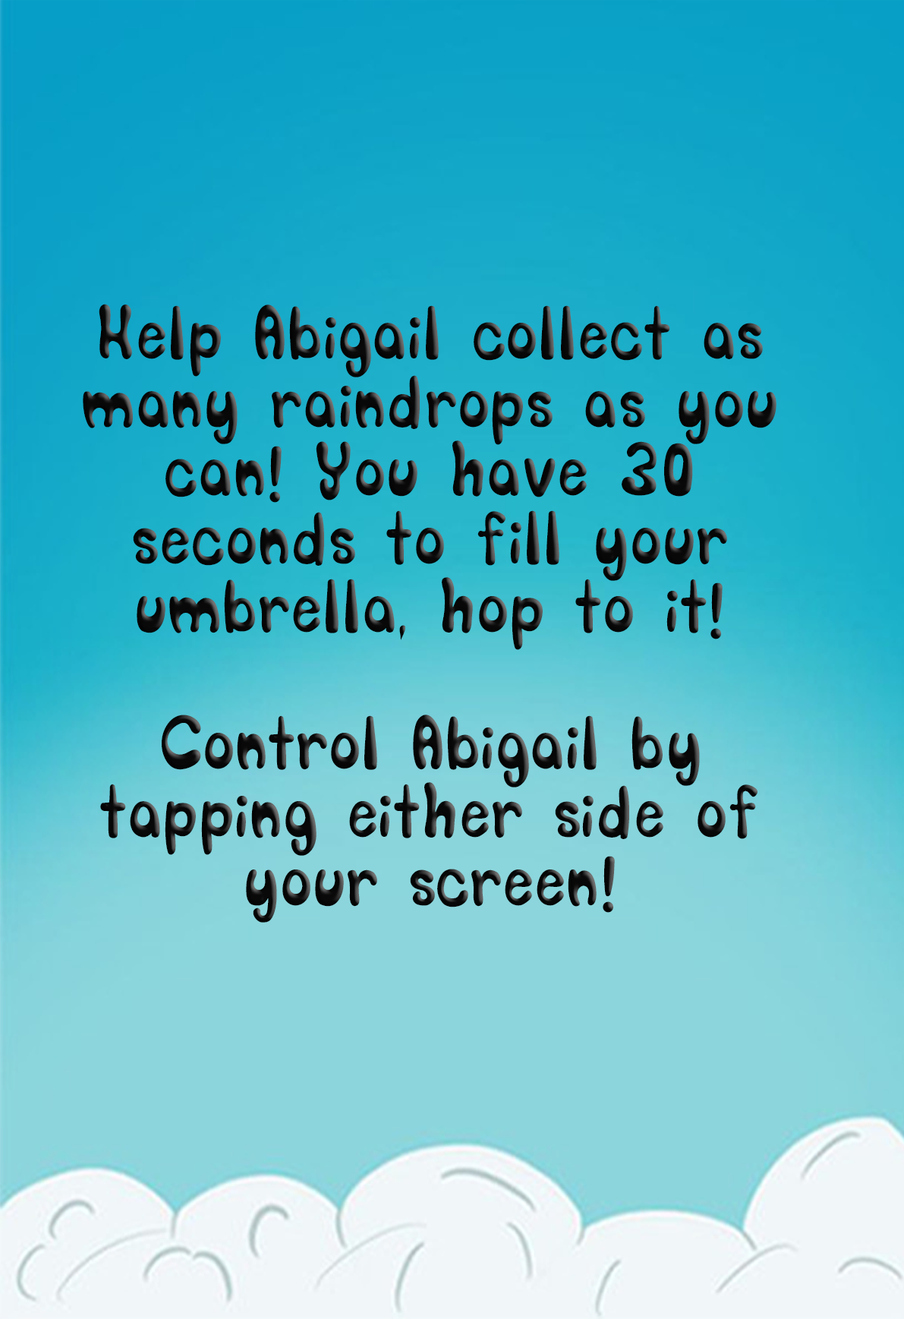
<style>
.page{position:relative;width:904px;height:1319px}
.page>*{position:absolute;margin:0}
.t1{font:56.9px "SORRY_SORRY";letter-spacing:0.03em;color:#0f0f0f}
</style>
<div class="page">
<p class="t1" style="left:83px;top:304px;width:694px;height:618px;text-align:center">Help Abigail collect as many raindrops as you can! You have 30 seconds to fill your umbrella, hop to it!<br><br>Control Abigail by tapping either side of your screen!</p>
</div>
